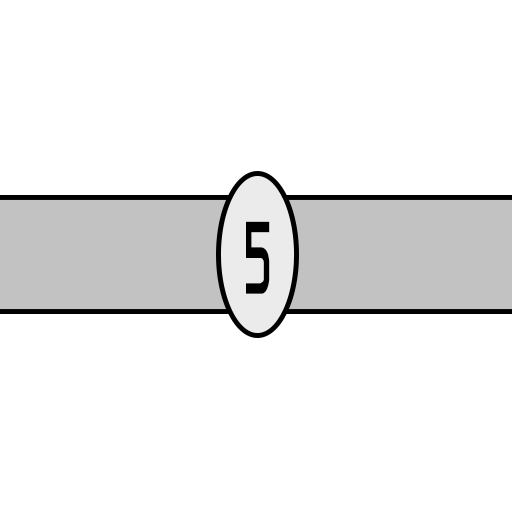
<style>
.page{position:relative;width:512px;height:512px;background:#ffffff}
.page>*{position:absolute;margin:0}
.t1{font:99.9px "PrisonerSF";color:#000000;scale:0.5 1}
</style>
<div class="page">
<p class="t1" style="left:246px;top:221px;width:24px;height:73px">5</p>
</div>
